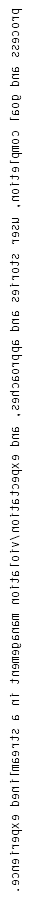
<style>
.page{position:relative;width:30px;height:900px;background:#ffffff}
.page>*{position:absolute;margin:0}
.t1{font:12px "LetterGothicStd";color:#000000}
</style>
<div class="page">
<p class="t1" style="left:9px;top:8px;width:14px;height:883px;rotate:90deg">process and goal completion, user stories and approaches, and expectation/violation management in a streamlined experience.</p>
</div>
